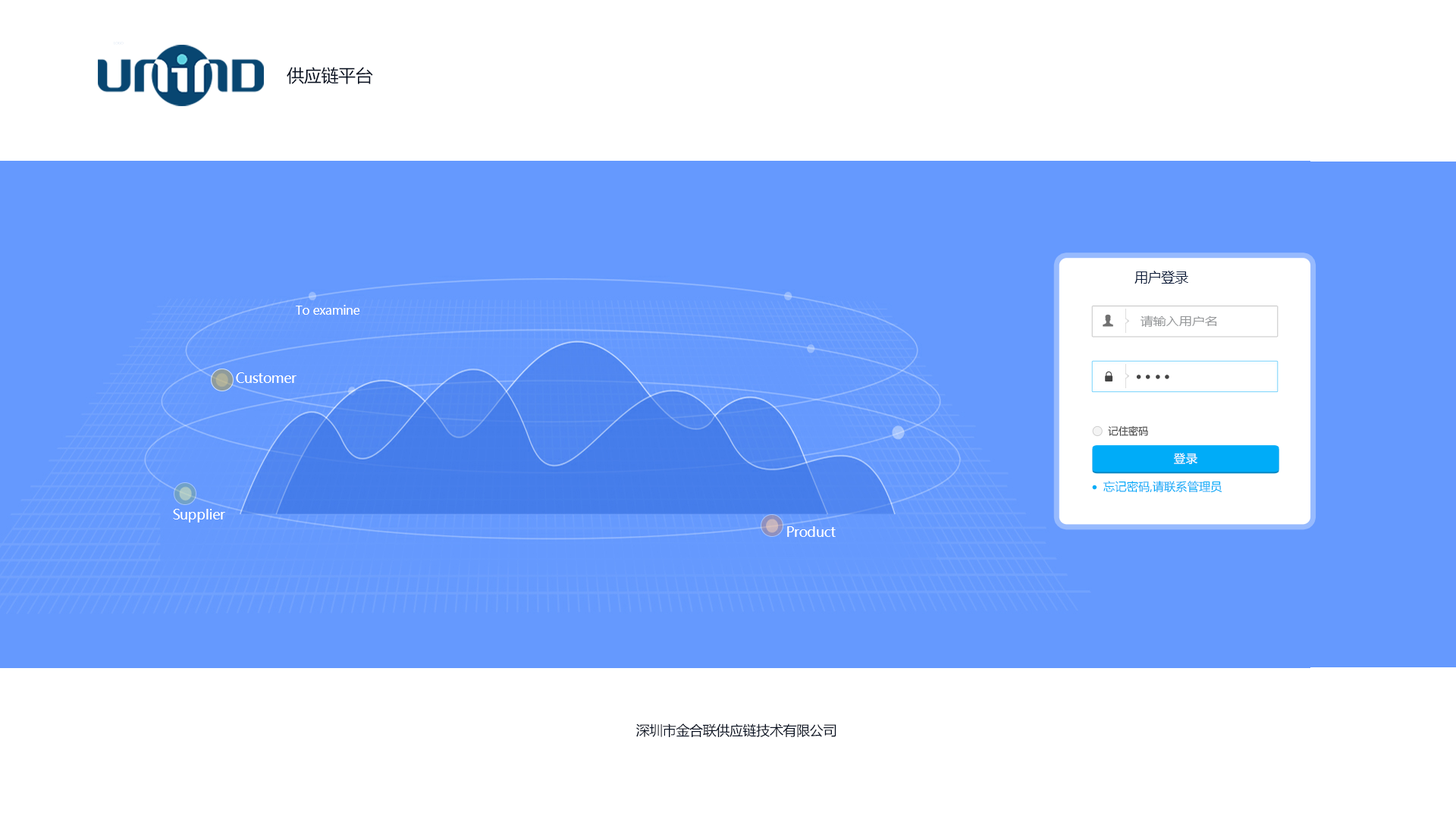
<style>
.page{position:relative;width:1456px;height:819px;background:#ffffff}
.page>*{position:absolute;margin:0}
.t1{font:3.4px "MicrosoftYaHei";letter-spacing:-0.02em;color:#dbe5f1;text-transform:uppercase}
.t2{font:17.4px "MicrosoftYaHei";letter-spacing:-0.02em;color:#071021;text-transform:uppercase}
.t3{font:13.6px "MicrosoftYaHei";letter-spacing:-0.02em;color:#101f3d;text-transform:uppercase}
.t4{font:12.1px "MicrosoftYaHei";letter-spacing:-0.02em;color:#ffffff}
.t5{font:11.7px "MicrosoftYaHei";color:#959799;scale:1.11 1}
.t6{font:13.6px "MicrosoftYaHei";letter-spacing:-0.02em;color:#ffffff}
.t7{font:10px "MicrosoftYaHei";color:#444444}
.t8{font:11.7px "MicrosoftYaHei";color:#ffffff}
.t9{font:11.7px "MicrosoftYaHei";color:#00acf8}
.t10{font:13.6px "MicrosoftYaHei";letter-spacing:-0.02em;color:#071021;text-transform:uppercase}
</style>
<div class="page">
<p class="t1" style="left:114px;top:42px;width:10px;height:3px">logo</p>
<p class="t2" style="left:287px;top:67px;width:86px;height:17px">供应链平台</p>
<p class="t3" style="left:1134px;top:271px;width:54px;height:13px">用户登录</p>
<p class="t4" style="left:296px;top:305px;width:64px;height:10px">To examine</p>
<p class="t5" style="left:1141px;top:315px;width:76px;height:13px">请输入用户名</p>
<p class="t6" style="left:236px;top:372px;width:61px;height:11px">Customer</p>
<p class="t7" style="left:1108px;top:425px;width:40px;height:11px">记住密码</p>
<p class="t8" style="left:1174px;top:453px;width:23px;height:11px">登录</p>
<p class="t9" style="left:1103px;top:481px;width:119px;height:12px">忘记密码,请联系管理员</p>
<p class="t6" style="left:173px;top:509px;width:52px;height:13px">Supplier</p>
<p class="t6" style="left:787px;top:526px;width:49px;height:11px">Product</p>
<p class="t10" style="left:636px;top:723px;width:200px;height:14px">深圳市金合联供应链技术有限公司</p>
</div>
